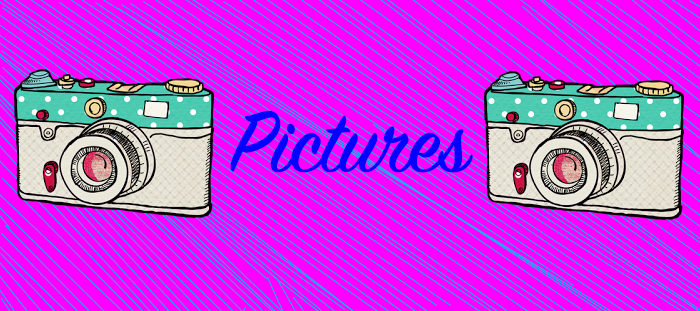
<style>
.page{position:relative;width:700px;height:311px;background:#ff00ff}
.page>*{position:absolute;margin:0}
.t1{font:96px "SignPainter-HouseScript";color:#0000fe}
</style>
<div class="page">
<p class="t1" style="left:230px;top:110px;width:243px;height:63px">Pictures</p>
</div>
